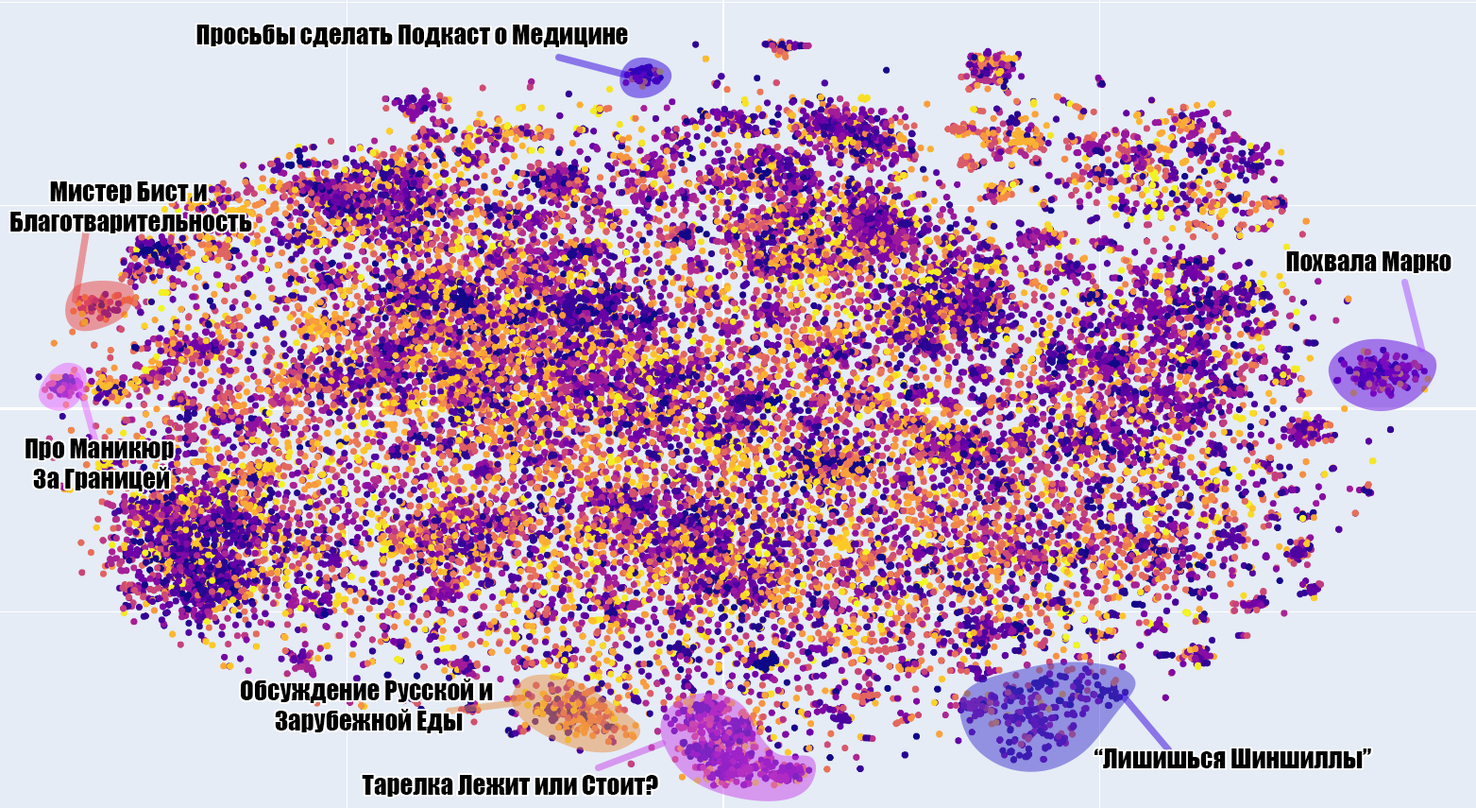
<style>
.page{position:relative;width:1476px;height:808px;background:#e5ecf6}
.page>*{position:absolute;margin:0}
.t1{font:25.5px "Impact";color:#000000}
</style>
<div class="page">
<p class="t1" style="left:196px;top:25px;width:432px;height:22px">Просьбы сделать Подкаст о Медицине</p>
<p class="t1" style="left:10px;top:181px;width:242px;height:52px;text-align:center">Мистер Бист и <br>Благотварительность</p>
<p class="t1" style="left:1287px;top:251px;width:165px;height:22px">Похвала Марко</p>
<p class="t1" style="left:26px;top:438px;width:148px;height:53px;text-align:center">Про Маникюр <br>За Границей</p>
<p class="t1" style="left:240px;top:678px;width:253px;height:55px;text-align:center">Обсуждение Русской и <br>Зарубежной Еды</p>
<p class="t1" style="left:1095px;top:748px;width:277px;height:20px">“Лишишься Шиншиллы”</p>
<p class="t1" style="left:362px;top:775px;width:296px;height:21px">Тарелка Лежит или Стоит?</p>
</div>
